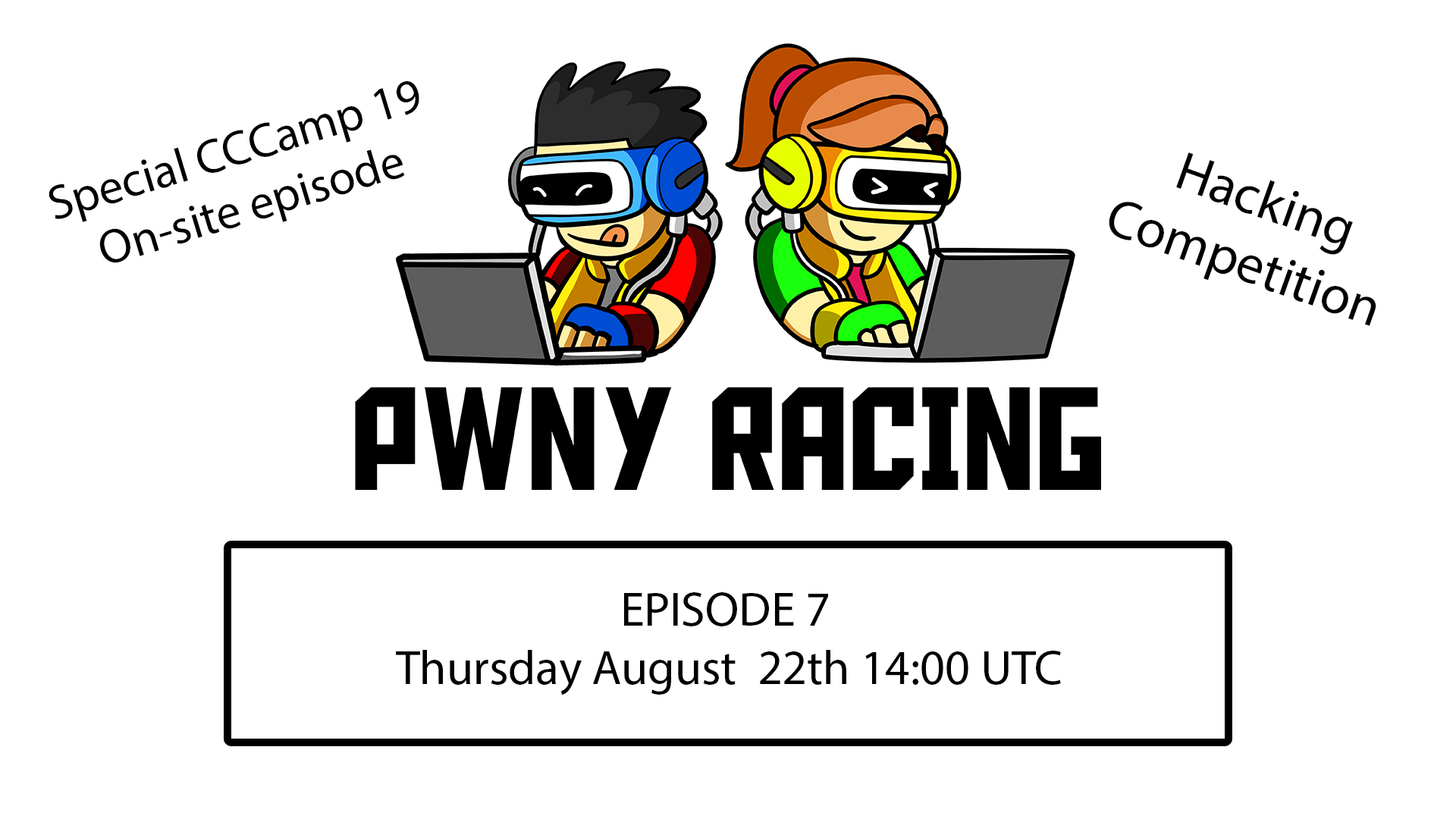
<style>
.page{position:relative;width:1456px;height:819px;background:#ffffff}
.page>*{position:absolute;margin:0}
.t1{font:48.5px "MyriadPro-Regular";color:#000000}
.t2{font:54.6px "MyriadPro-Regular";color:#000000}
</style>
<div class="page">
<p class="t1" style="left:49px;top:81px;width:370px;height:182px;text-align:center;rotate:-17deg">Special CCCamp 19<br>On-site episode</p>
<p class="t2" style="left:1109px;top:152px;width:267px;height:174px;text-align:center;rotate:20deg">Hacking<br>Competition</p>
<p class="t1" style="left:396px;top:592px;width:665px;height:103px;text-align:center">EPISODE 7<br> Thursday August  22th 14:00 UTC</p>
</div>
